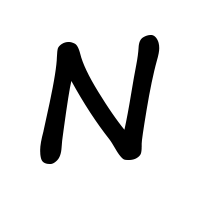
<style>
.page{position:relative;width:200px;height:200px;background:#ffffff}
.page>*{position:absolute;margin:0}
.t1{font:170px "SegoePrint-Bold";color:#000000}
</style>
<div class="page">
<p class="t1" style="left:40px;top:35px;width:120px;height:129px">N</p>
</div>
